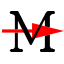
<style>
.page{position:relative;width:64px;height:64px;background:#ffffff}
.page>*{position:absolute;margin:0}
.t1{font:59.3px "PoorRichard-Regular";color:#000000}
</style>
<div class="page">
<p class="t1" style="left:9px;top:11px;width:46px;height:41px">M</p>
</div>
